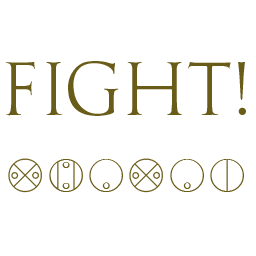
<style>
.page{position:relative;width:256px;height:256px;background:#ffffff}
.page>*{position:absolute;margin:0}
.t1{font:75px "GoudyTrajan-Regular";color:#695b18}
.t2{font:41.7px "MataNui";color:#695b18}
</style>
<div class="page">
<p class="t1" style="left:5px;top:61px;width:241px;height:55px">Fight!</p>
<p class="t2" style="left:8px;top:158px;width:236px;height:35px">whawai</p>
</div>
